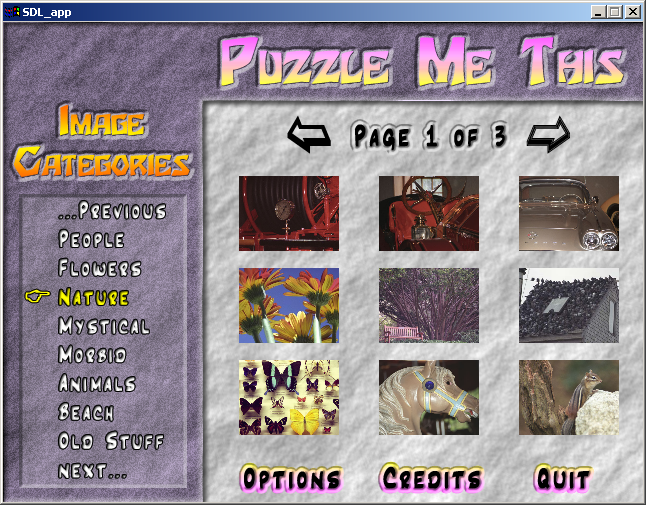
<style>
.page{position:relative;width:646px;height:505px}
.page>*{position:absolute;margin:0}
.t1{font:54px "Houters-Normal";font-variant:small-caps;font-weight:bold}
.t2{font:34px "Houters-Normal";font-variant:small-caps;font-weight:bold}
.t3{font:30px "Inkpen2Script";letter-spacing:0.1em;color:#000000;font-weight:bold}
.t4{font:24px "Inkpen2Script";letter-spacing:0.1em;font-weight:bold}
</style>
<div class="page">
<p class="t1" style="left:221px;top:37px;width:403px;height:49px">Puzzle Me This</p>
<p class="t2" style="left:14px;top:105px;width:176px;height:72px;text-align:center">Image<br>Categories</p>
<p class="t3" style="left:354px;top:124px;width:151px;height:27px">Page 1 of 3</p>
<p class="t4" style="left:59px;top:201px;width:106px;height:277px">...Previous<br>People<br>Flowers<br>Nature<br>Mystical<br>Morbid<br>Animals<br>Beach<br>Old Stuff<br>next...</p>
<p class="t3" style="left:244px;top:466px;width:346px;height:23px">Options   Credits    Quit</p>
</div>
